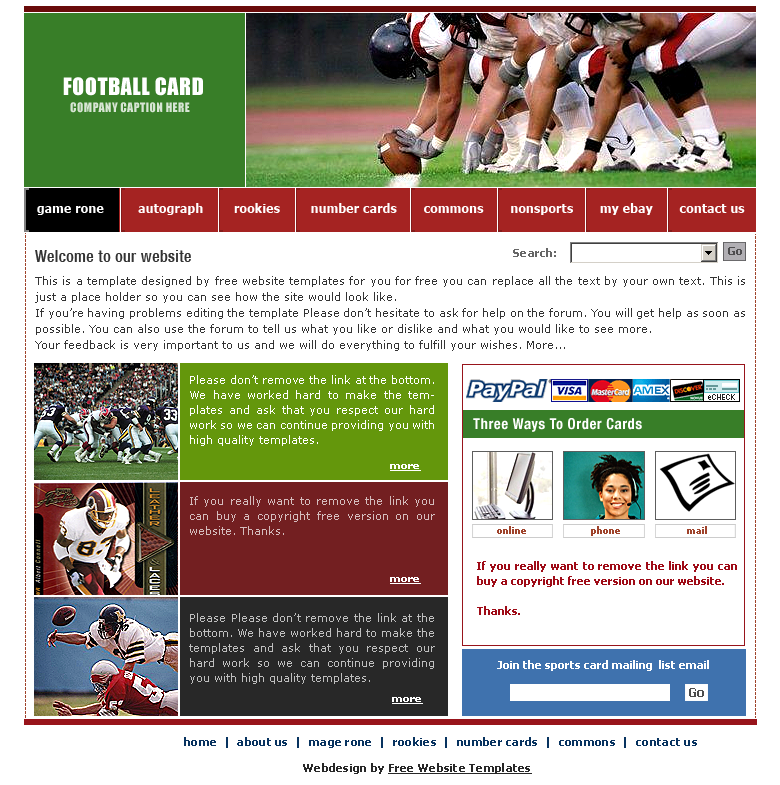
<style>
.page{position:relative;width:780px;height:785px;background:#ffffff}
.page>*{position:absolute;margin:0}
.t1{font:22px "Impact";letter-spacing:0.025em;color:#ffffff;text-transform:uppercase}
.t2{font:12px "Impact";letter-spacing:0.025em;color:#d7e5d4;text-transform:uppercase}
.t3{font:12px "Tahoma-Bold";letter-spacing:0.025em;color:#ffffff}
.t4{font:16px "HelveticaNeue-MediumCond";letter-spacing:0.025em;color:#333333}
.t5{font:11px "Tahoma-Bold";letter-spacing:0.025em;color:#666666}
.t6{font:11px "Tahoma-Bold";color:#4e4d4f}
.t7{font:11px/16px "Verdana";color:#333333}
.t8{font:11px/15px "Verdana";color:#ffffff}
.t9{font:15px "HelveticaNeue-BoldCond";letter-spacing:0.025em;color:#ffffff}
.t10{font:10px "Verdana-Bold";color:#ffffff;text-decoration:underline}
.t11{font:11px/15px "Verdana";color:#d5bcbd}
.t12{font:10px "Tahoma-Bold";color:#9f432b}
.t13{font:11px/15px "Tahoma-Bold";color:#9f0b17}
.t14{font:11px/15px "Verdana";color:#bfbfbf}
.t15{font:11px "Tahoma-Bold";color:#ffffff}
.t16{font:12px "Tahoma-Bold";color:#4c4c4c}
.t17{font:11px "Tahoma-Bold";letter-spacing:0.025em;color:#083360}
.t18{font:11px "Tahoma-Bold";letter-spacing:0.025em;color:#282828;text-decoration:underline}
.t19{font:11px "Tahoma-Bold";letter-spacing:0.025em;color:#282828}
</style>
<div class="page">
<p class="t1" style="left:63px;top:77px;width:140px;height:19px">football card</p>
<p class="t2" style="left:70px;top:102px;width:120px;height:11px">company caption here</p>
<p class="t3" style="left:37px;top:203px;width:708px;height:12px">game rone         autograph        rookies        number cards       commons       nonsports       my ebay       contact us</p>
<p class="t4" style="left:35px;top:250px;width:156px;height:12px">Welcome to our website</p>
<p class="t5" style="left:513px;top:248px;width:43px;height:9px">Search:</p>
<p class="t6" style="left:728px;top:247px;width:14px;height:8px">Go</p>
<p class="t7" style="left:35px;top:276px;width:710px;height:75px;text-align:justify">This is a template designed by free website templates for you for free you can replace all the text by your own text. This is just a place holder so you can see how the site would look like.<br>If you’re having problems editing the template Please don’t hesitate to ask for help on the forum. You will get help as soon as possible. You can also use the forum to tell us what you like or dislike and what you would like to see more.<br>Your feedback is very important to us and we will do everything to fulfill your wishes. More...</p>
<p class="t8" style="left:190px;top:375px;width:244px;height:71px;text-align:justify">Please don’t remove the link at the bottom. We have worked hard to make the templates and ask that you respect our hard work so we can continue providing you with high quality templates.</p>
<p class="t9" style="left:473px;top:418px;width:169px;height:14px">Three Ways To Order Cards</p>
<p class="t10" style="left:390px;top:464px;width:31px;height:7px">more</p>
<p class="t11" style="left:190px;top:496px;width:245px;height:39px;text-align:justify">If you really want to remove the link you can buy a copyright free version on our website. Thanks.</p>
<p class="t12" style="left:497px;top:526px;width:29px;height:8px">online</p>
<p class="t12" style="left:591px;top:526px;width:29px;height:10px">phone</p>
<p class="t12" style="left:687px;top:526px;width:20px;height:8px">mail</p>
<p class="t13" style="left:477px;top:561px;width:260px;height:54px;text-align:justify">If you really want to remove the link you can buy a copyright free version on our website.<br><br>Thanks.</p>
<p class="t10" style="left:390px;top:577px;width:31px;height:7px">more</p>
<p class="t14" style="left:189px;top:613px;width:246px;height:71px;text-align:justify">Please Please don’t remove the link at the bottom. We have worked hard to make the templates and ask that you respect our hard work so we can continue providing you with high quality templates.</p>
<p class="t15" style="left:497px;top:660px;width:212px;height:11px">Join the sports card mailing  list email</p>
<p class="t16" style="left:689px;top:688px;width:15px;height:9px">Go</p>
<p class="t10" style="left:392px;top:697px;width:31px;height:7px">more</p>
<p class="t17" style="left:184px;top:737px;width:513px;height:11px">home  |  about us  |  mage rone  |  rookies  |  number cards  |  commons  |  contact us</p>
<p class="t18" style="left:303px;top:763px;width:229px;height:11px"><span class="t19">Webdesign by </span>Free Website Templates</p>
</div>
